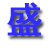
<style>
.page{position:relative;width:50px;height:50px;background:#ffffff}
.page>*{position:absolute;margin:0}
.t1{font:36px "SimHei";letter-spacing:0.5em;color:#302bff;font-weight:bold}
</style>
<div class="page">
<p class="t1" style="left:7px;top:2px;width:35px;height:34px">盛</p>
</div>
